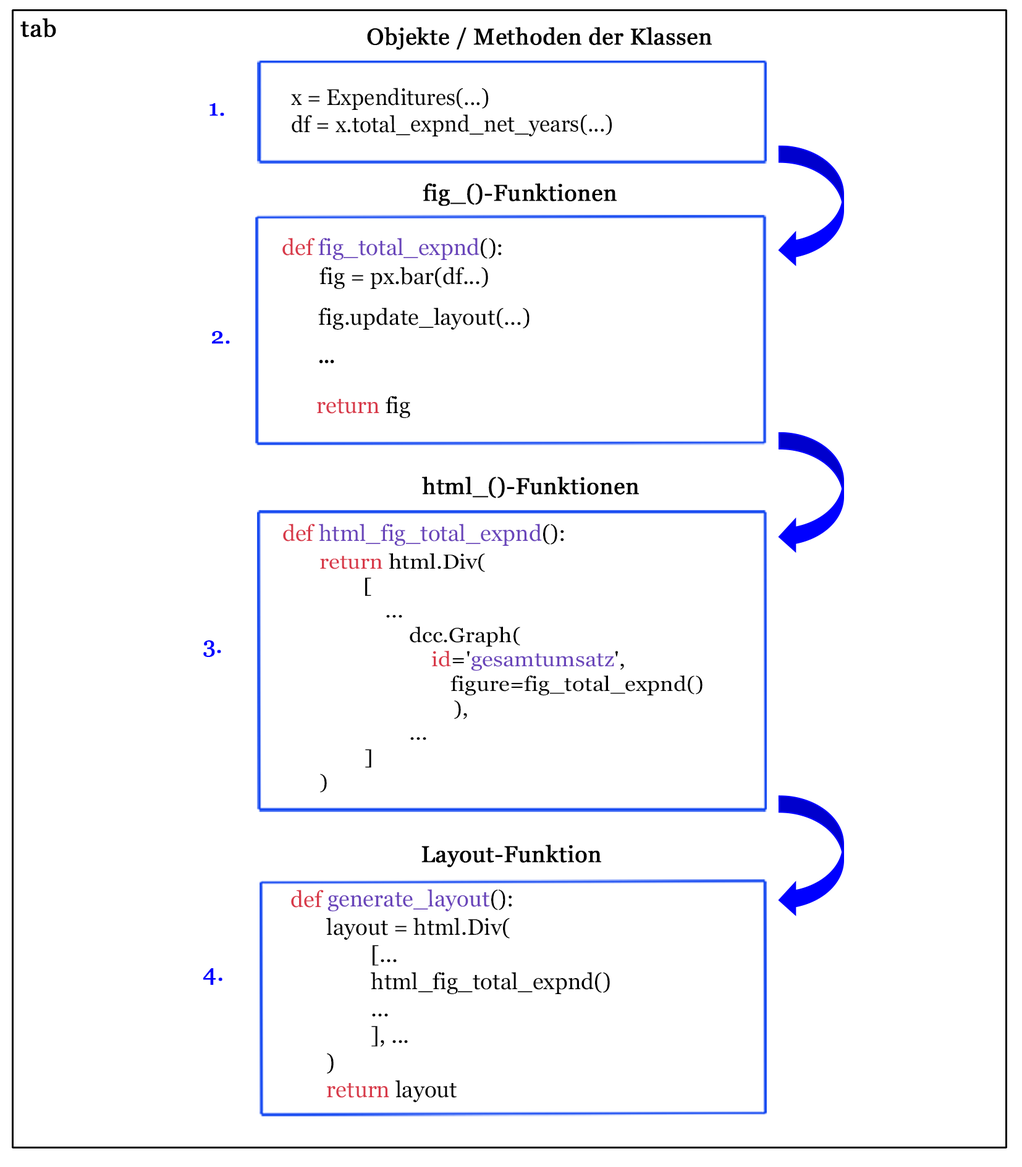
<style>
.page{position:relative;width:1022px;height:1167px;background:#ffffff}
.page>*{position:absolute;margin:0}
.t1{font:24px "Georgia";color:#000000;font-weight:bold}
.t2{font:22.9px "Georgia";color:#000000;font-weight:bold}
.t3{font:22.5px "Georgia";color:#000000;scale:0.97 1}
.t4{font:22.9px "Georgia";color:#0000ff;font-weight:bold}
.t5{font:22.5px "Georgia";color:#6944ba}
.t6{font:22.5px "Georgia";color:#d83949}
.t7{font:22.5px "Georgia";color:#000000}
.t8{font:22.5px "MyriadPro-Semibold";color:#000000}
.t9{font:20.4px "Georgia";color:#000000;scale:1.11 1}
.t10{font:20.4px "Georgia";color:#d83949;scale:1.11 1}
.t11{font:20.4px "Georgia";color:#6944ba;scale:1.11 1}
.t12{font:22.9px "Georgia";color:#0000ff;font-weight:bold;scale:1.03 1}
</style>
<div class="page">
<p class="t1" style="left:20px;top:18px;width:36px;height:20px">tab</p>
<p class="t2" style="left:367px;top:27px;width:344px;height:23px">Objekte / Methoden der Klassen</p>
<p class="t3" style="left:291px;top:88px;width:321px;height:48px">x = Expenditures(...)<br>df = x.total_expnd_net_years(...)</p>
<p class="t4" style="left:209px;top:103px;width:15px;height:13px">1.</p>
<p class="t2" style="left:422px;top:183px;width:194px;height:23px">fig_()-Funktionen</p>
<p class="t5" style="left:282px;top:238px;width:220px;height:22px"><span class="t6">def </span>fig_total_expnd<span class="t7">():</span></p>
<p class="t7" style="left:319px;top:267px;width:169px;height:22px">fig = px.bar(df...)</p>
<p class="t7" style="left:318px;top:308px;width:211px;height:22px">fig.update_layout(...)</p>
<p class="t4" style="left:212px;top:331px;width:18px;height:13px">2.</p>
<p class="t8" style="left:319px;top:359px;width:15px;height:5px">...</p>
<p class="t6" style="left:317px;top:396px;width:93px;height:22px">return <span class="t7">fig</span></p>
<p class="t2" style="left:422px;top:477px;width:217px;height:21px">html_()-Funktionen</p>
<p class="t5" style="left:283px;top:524px;width:281px;height:22px"><span class="t6">def </span>html_fig_total_expnd<span class="t7">():</span></p>
<p class="t9" style="left:320px;top:553px;width:382px;height:240px"><span class="t10">return </span>html.Div(<br>        [<br>            ...<br>    dcc.Graph(<br>     <span class="t10">id</span>='<span class="t11">gesamtumsatz</span>',<br>                        figure=fig_total_expnd()<br>      ),<br>    ...<br>  ]<br>)</p>
<p class="t4" style="left:203px;top:640px;width:18px;height:17px">3.</p>
<p class="t2" style="left:421px;top:845px;width:180px;height:23px">Layout-Funktion</p>
<p class="t5" style="left:291px;top:889px;width:221px;height:23px"><span class="t6">def </span>generate_layout<span class="t7">():</span></p>
<p class="t7" style="left:326px;top:918px;width:284px;height:184px">layout = html.Div(<br>         [...<br>  html_fig_total_expnd()<br>  ...<br>  ], ...<br>)<br><span class="t6">return </span>layout</p>
<p class="t12" style="left:203px;top:968px;width:19px;height:17px">4.</p>
</div>
